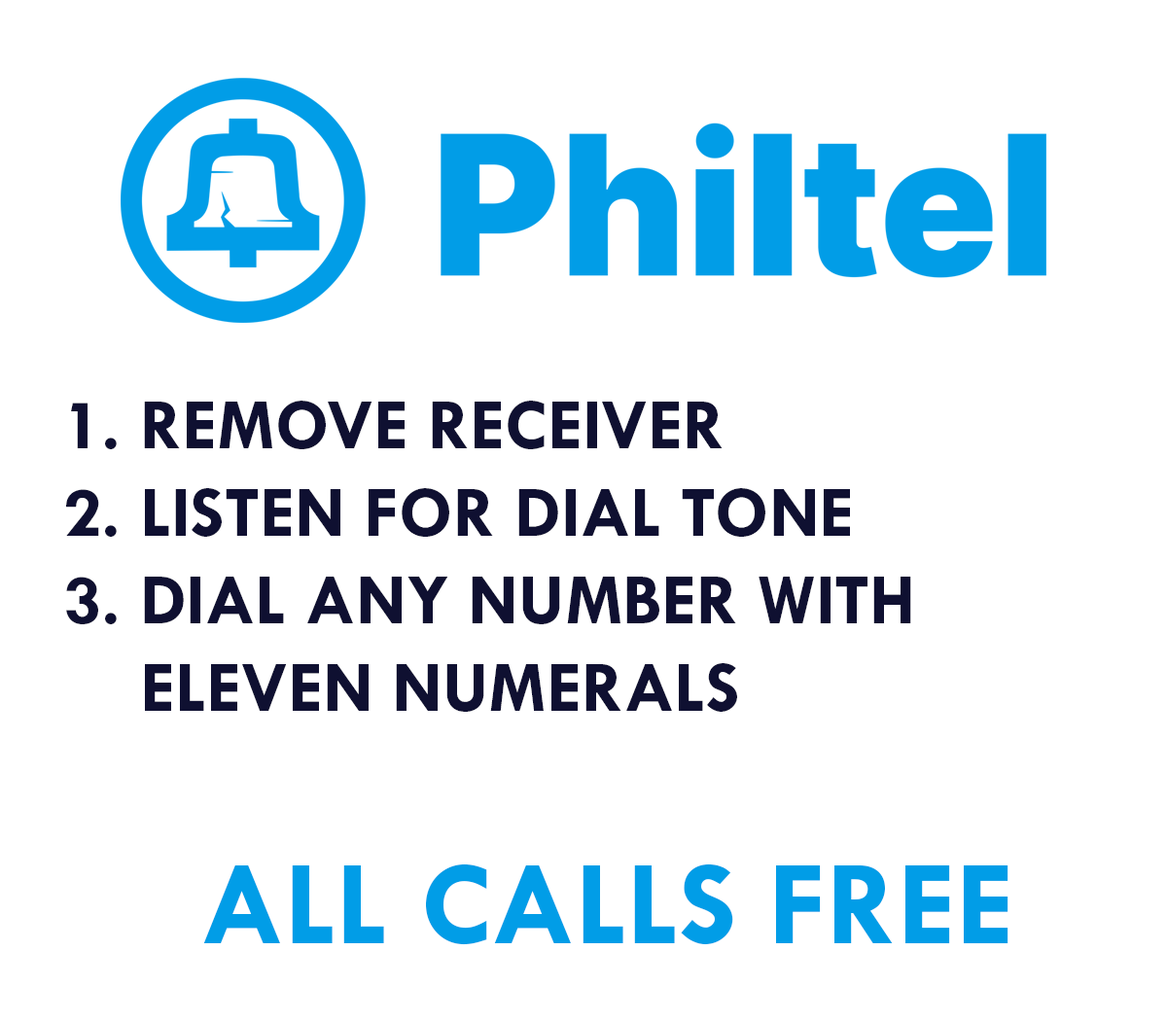
<style>
.page{position:relative;width:1167px;height:1021px;background:#ffffff}
.page>*{position:absolute;margin:0}
.t1{font:73px "TwCenMTStd-Bold";color:#0f1031}
.t2{font:121.6px "TwCenMTStd-Bold";color:#019de7}
</style>
<div class="page">
<p class="t1" style="left:66px;top:401px;width:846px;height:311px">1. REMOVE RECEIVER<br>2. LISTEN FOR DIAL TONE<br>3. DIAL ANY NUMBER WITH<br>    ELEVEN NUMERALS</p>
<p class="t2" style="left:203px;top:864px;width:806px;height:82px">ALL CALLS FREE</p>
</div>
